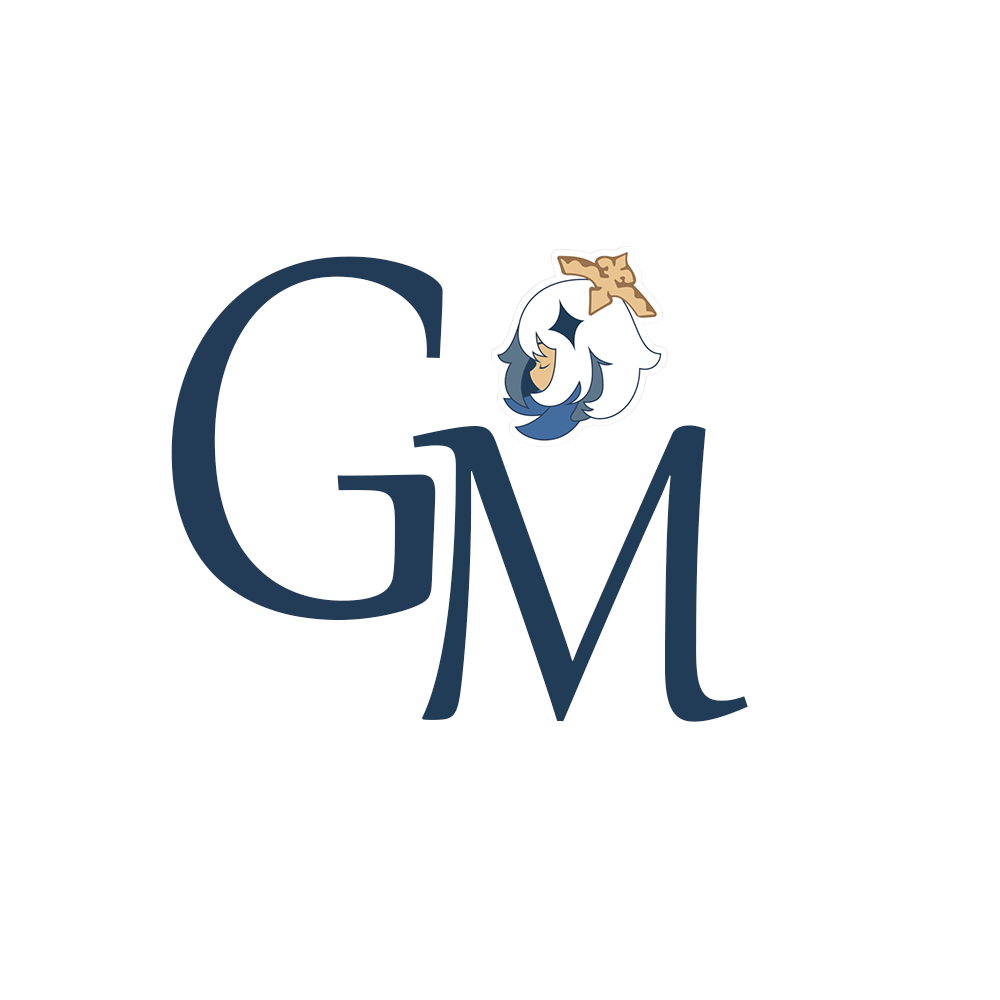
<style>
.page{position:relative;width:1000px;height:1000px;background:#ffffff}
.page>*{position:absolute;margin:0}
.t1{font:619.3px "Gabriola";color:#223c57}
.t2{font:516.1px "Gabriola";color:#213c57}
</style>
<div class="page">
<p class="t1" style="left:171px;top:256px;width:272px;height:365px">G</p>
<p class="t2" style="left:413px;top:425px;width:335px;height:297px">M</p>
</div>
